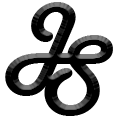
<style>
.page{position:relative;width:120px;height:120px;background:#ffffff}
.page>*{position:absolute;margin:0}
.t1{font:89.7px "HarlowSolid";letter-spacing:0.025em;color:#000000;scale:1.09 1}
</style>
<div class="page">
<p class="t1" style="left:5px;top:2px;width:71px;height:94px">J</p>
<p class="t1" style="left:44px;top:35px;width:69px;height:81px">S</p>
</div>
